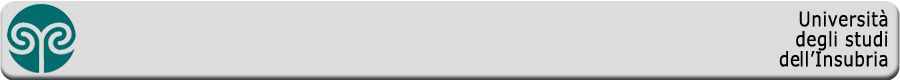
<style>
.page{position:relative;width:900px;height:80px;background:#dcdcdc}
.page>*{position:absolute;margin:0}
.t1{font:20px "Verdana";letter-spacing:0.04em;color:#000000;scale:0.83 1}
</style>
<div class="page">
<p class="t1" style="left:779px;top:9px;width:109px;height:58px;text-align:right">Università<br>degli studi<br>dell’Insubria</p>
</div>
